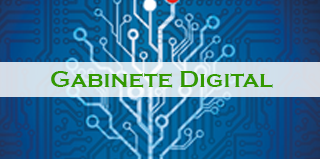
<style>
.page{position:relative;width:320px;height:159px}
.page>*{position:absolute;margin:0}
.t1{font:24px "CopperplateGothic-Bold";color:#339900}
</style>
<div class="page">
<p class="t1" style="left:51px;top:71px;width:222px;height:17px">Gabinete Digital</p>
</div>
